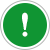
<style>
.page{position:relative;width:50px;height:50px;background:#109533}
.page>*{position:absolute;margin:0}
.t1{font:37.5px "KannadaMN-Bold";letter-spacing:-0.01em;color:#ffffff}
</style>
<div class="page">
<p class="t1" style="left:22px;top:12px;width:6px;height:25px">!</p>
</div>
